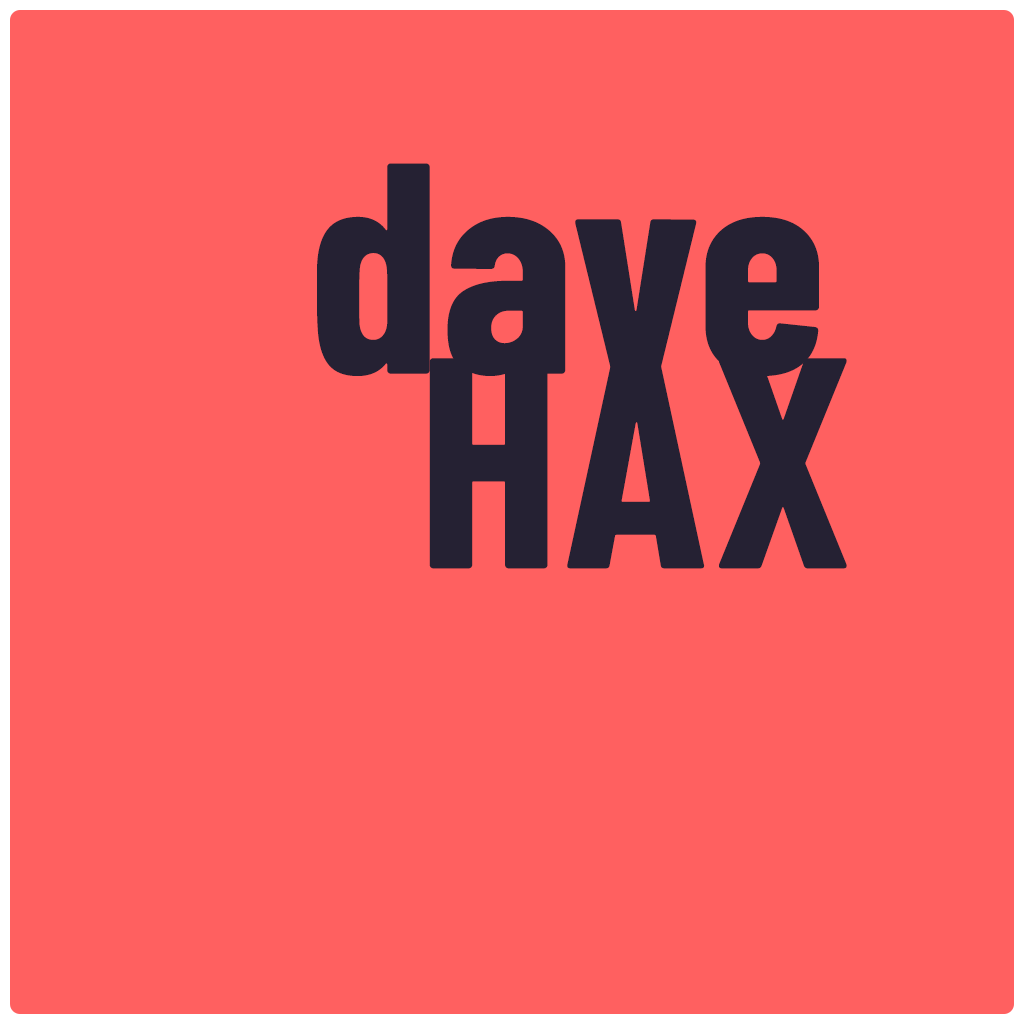
<style>
.page{position:relative;width:1024px;height:1024px;background:#ff6060}
.page>*{position:absolute;margin:0}
.t1{font:300px "BarlowCondensed-Bold";color:#252133}
</style>
<div class="page">
<p class="t1" style="left:317px;top:163px;width:502px;height:213px">dave</p>
<p class="t1" style="left:429px;top:358px;width:418px;height:211px">HAX</p>
</div>
